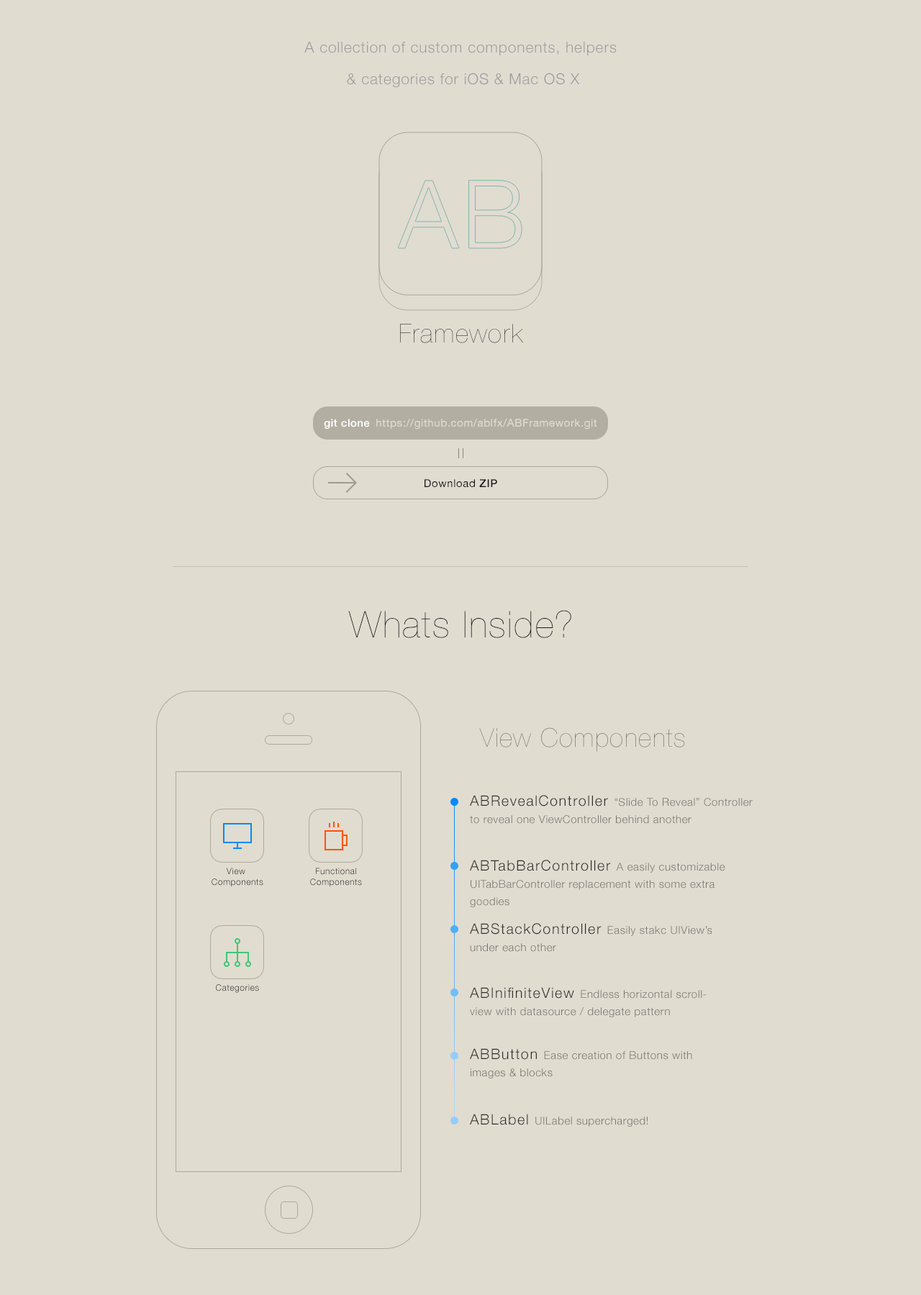
<style>
.page{position:relative;width:921px;height:1295px;background:#e1dcd0}
.page>*{position:absolute;margin:0}
.t1{font:15.1px/31.6px "HelveticaNeue-Light";letter-spacing:0.042em;color:#9d9d9d}
.t2{font:26px "HelveticaNeue-UltraLight";letter-spacing:0.042em;color:#393939}
.t3{font:10.7px "HelveticaNeue-Medium";letter-spacing:0.042em;color:#fffffe}
.t4{font:10.8px "HelveticaNeue";letter-spacing:0.042em;color:#e1dcd0}
.t5{font:10.8px "HelveticaNeue";letter-spacing:0.042em;color:#161616}
.t6{font:10.8px "HelveticaNeue-Medium";letter-spacing:0.042em;color:#161616}
.t7{font:36.8px "HelveticaNeue-UltraLight";letter-spacing:0.042em;color:#191919}
.t8{font:25.9px "HelveticaNeue-UltraLight";letter-spacing:0.042em;color:#777265}
.t9{font:10.8px/17.3px "HelveticaNeue-Light";letter-spacing:0.042em;color:#7a766d}
.t10{font:14.4px/17.3px "HelveticaNeue-Light";letter-spacing:0.075em;color:#2e2c26}
.t11{font:8.7px "HelveticaNeue-Light";letter-spacing:0.042em;color:#2e2c26}
.t12{font:8.7px "HelveticaNeue-Light";letter-spacing:0.042em}
.t13{font:10.8px "HelveticaNeue-Light";letter-spacing:0.042em;color:#7a766d}
.t14{font:14.4px "HelveticaNeue-Light";letter-spacing:0.075em;color:#2e2c26}
</style>
<div class="page">
<p class="t1" style="left:304px;top:42px;width:313px;height:46px;text-align:center">A collection of custom components, helpers <br>&amp; categories for iOS &amp; Mac OS X</p>
<p class="t2" style="left:400px;top:324px;width:124px;height:19px">Framework</p>
<p class="t3" style="left:324px;top:419px;width:46px;height:10px">git clone</p>
<p class="t4" style="left:376px;top:419px;width:221px;height:10px">https://github.com/ablfx/ABFramework.git</p>
<p class="t5" style="left:424px;top:479px;width:73px;height:8px">Download <span class="t6">ZIP</span></p>
<p class="t7" style="left:348px;top:610px;width:223px;height:28px">Whats Inside?</p>
<p class="t8" style="left:479px;top:727px;width:206px;height:25px">View Components</p>
<p class="t9" style="left:470px;top:795px;width:283px;height:29px"><span class="t10">ABRevealController </span>“Slide To Reveal” Controller<br>to reveal one ViewController behind another</p>
<p class="t11" style="left:212px;top:868px;width:51px;height:19px;text-align:center">View <br>Components</p>
<p class="t12" style="left:310px;top:868px;width:52px;height:19px;text-align:center">Functional<br>Components</p>
<p class="t9" style="left:470px;top:860px;width:255px;height:47px"><span class="t10">ABTabBarController </span>A easily customizable <br>UITabBarController replacement with some extra<br>goodies</p>
<p class="t9" style="left:470px;top:923px;width:242px;height:29px"><span class="t10">ABStackController </span>Easily stakc UIView’s <br>under each other</p>
<p class="t11" style="left:216px;top:984px;width:43px;height:9px">Categories</p>
<p class="t9" style="left:470px;top:987px;width:236px;height:30px"><span class="t10">ABInifiniteView </span>Endless horizontal scroll-<br>view with datasource / delegate pattern</p>
<p class="t9" style="left:470px;top:1048px;width:222px;height:30px"><span class="t10">ABButton </span>Ease creation of Buttons with <br>images &amp; blocks</p>
<p class="t13" style="left:470px;top:1114px;width:178px;height:13px"><span class="t14">ABLabel </span>UILabel supercharged!</p>
</div>
